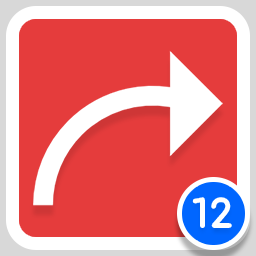
<style>
.page{position:relative;width:256px;height:256px;background:#e53c3c}
.page>*{position:absolute;margin:0}
.t1{font:37.3px "Roboto-Thin";color:#ffffff}
</style>
<div class="page">
<p class="t1" style="left:194px;top:199px;width:36px;height:27px">12</p>
</div>
